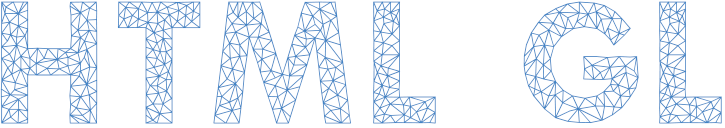
<style>
.page{position:relative;width:725px;height:128px;background:#ffffff}
.page>*{position:absolute;margin:0}
.t1{font:158px "Aroly";letter-spacing:-0.075em;color:#4183c4}
.t2{font:158px "Aroly";letter-spacing:-0.12em;color:#4183c4}
</style>
<div class="page">
<p class="t1" style="left:0px;top:1px;width:722px;height:123px">H<span class="t2">T</span>ML GL</p>
</div>
